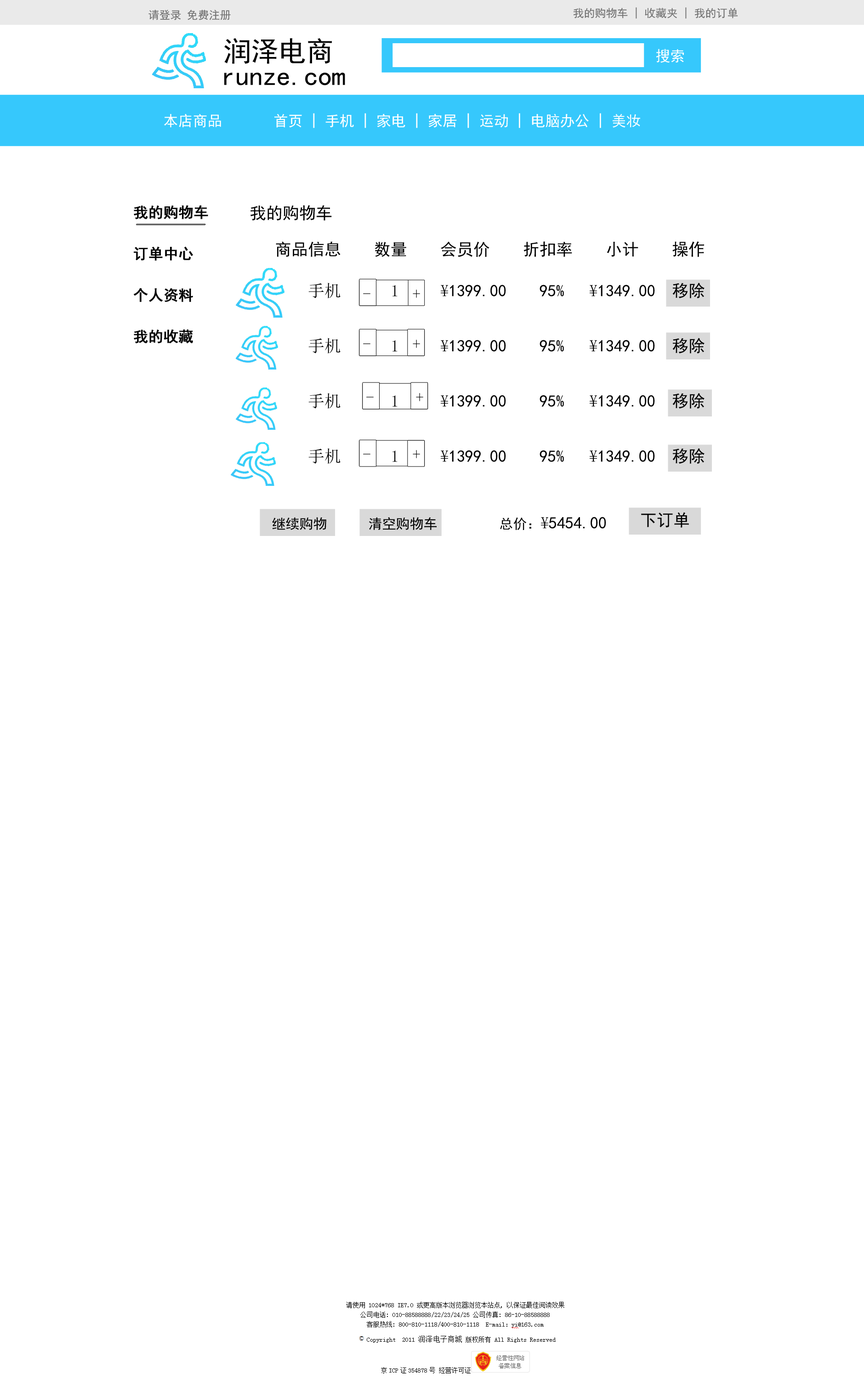
<style>
.page{position:relative;width:864px;height:1379px;background:#ffffff}
.page>*{position:absolute;margin:0}
.t1{font:11px "SimHei";color:#6f6f6f}
.t2{font:27.6px "SimHei";color:#010101}
.t3{font:14.7px "SimHei";color:#ffffff}
.t4{font:14.7px/13.8px "SimHei";color:#000000;font-weight:bold}
.t5{font:16.6px "SimHei";color:#000000}
.t6{font:16.6px/13.8px "SimHei";color:#000000}
.t7{font:16.6px/13.8px "SimSun";color:#000000}
.t8{font:16.6px "SimSun"}
.t9{font:13.8px "SimHei";color:#000000}
.t10{font:16.6px "SimSun";color:#000000}
</style>
<div class="page">
<p class="t1" style="left:149px;top:10px;width:82px;height:10px">请登录 免费注册</p>
<p class="t1" style="left:573px;top:7px;width:165px;height:12px">我的购物车 | 收藏夹 | 我的订单</p>
<p class="t2" style="left:224px;top:38px;width:108px;height:26px">润泽电商</p>
<p class="t3" style="left:656px;top:49px;width:28px;height:14px">搜索</p>
<p class="t2" style="left:224px;top:73px;width:121px;height:13px">runze.com</p>
<p class="t3" style="left:164px;top:113px;width:477px;height:15px">本店商品       首页 | 手机 | 家电 | 家居 | 运动 | 电脑办公 | 美妆</p>
<p class="t4" style="left:134px;top:205px;width:74px;height:138px">我的购物车<br><br><br>订单中心<br><br><br>个人资料<br><br><br>我的收藏</p>
<p class="t5" style="left:251px;top:205px;width:81px;height:16px">我的购物车</p>
<p class="t6" style="left:276px;top:241px;width:429px;height:223px">商品信息    数量    会员价    折扣率    小计    操作<br><span class="t7"><br>   <br>    手机      1     ¥</span>1399.00    95%   <span class="t7">¥</span>1349.00  移除<br><br><br><br><span class="t7">    手机      1     ¥</span>1399.00    95%   <span class="t7">¥</span>1349.00  移除<br><br><br><br><span class="t7">    手机      1     ¥</span>1399.00    95%   <span class="t7">¥</span>1349.00  移除<br><br><br><br><span class="t7">    手机      1     ¥</span>1399.00    95%   <span class="t7">¥</span>1349.00  移除</p>
<p class="t8" style="left:363px;top:290px;width:57px;height:8px">-     +</p>
<p class="t8" style="left:363px;top:340px;width:57px;height:8px">-     +</p>
<p class="t8" style="left:366px;top:393px;width:57px;height:8px">-     +</p>
<p class="t8" style="left:363px;top:450px;width:57px;height:8px">-     +</p>
<p class="t9" style="left:272px;top:517px;width:334px;height:14px">继续购物      清空购物车         总价：<span class="t10">¥</span><span class="t5">5454.00</span></p>
<p class="t5" style="left:641px;top:512px;width:48px;height:16px">下订单</p>
</div>
